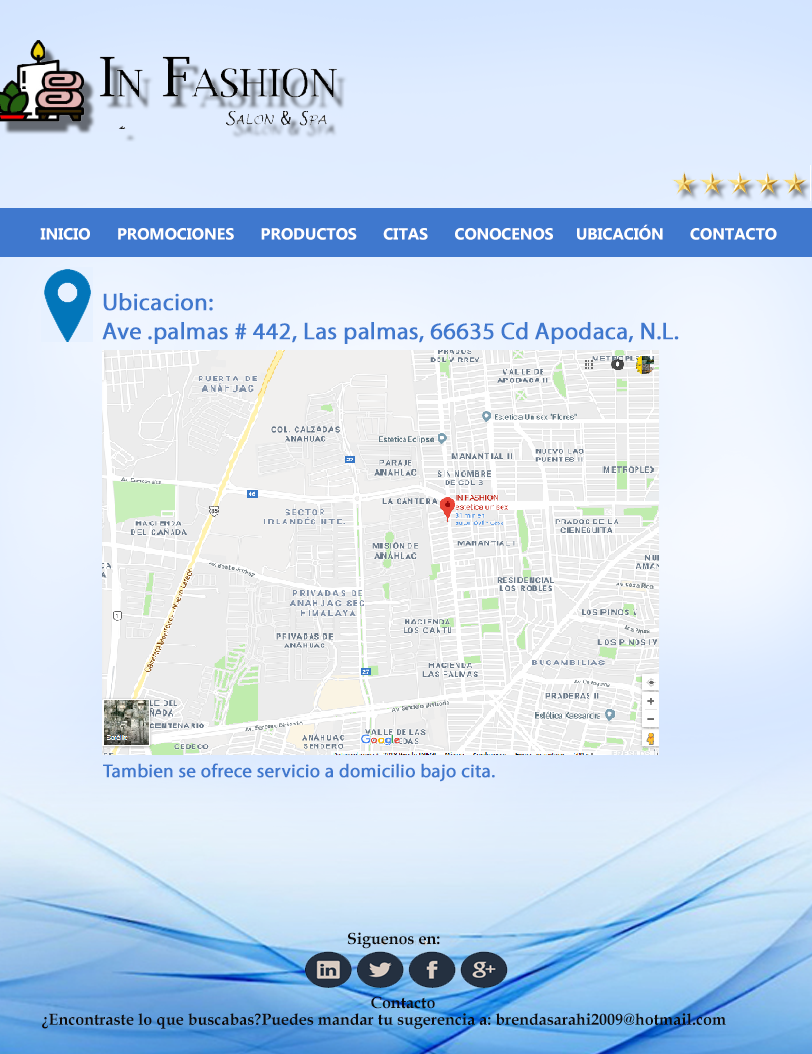
<style>
.page{position:relative;width:812px;height:1054px}
.page>*{position:absolute;margin:0}
.t1{font:16px "MicrosoftTaiLe-Bold";color:#ffffff}
.t2{font:12px "MicrosoftTaiLe-Bold";color:#ffffff}
.t3{font:24px "MyriadPro-Regular";color:#3f78ce;font-weight:bold}
.t4{font:18.7px "MyriadPro-Regular";color:#3f78ce;font-weight:bold}
.t5{font:12px "BookAntiqua-Bold";color:#0e0b0b}
</style>
<div class="page">
<p class="t1" style="left:40px;top:224px;width:737px;height:16px"><span class="t2">    I</span>NICIO      PROMOCIONES      PRODUCTOS      CITAS      CONOCENOS     UBICACIÓN      CONTACTO</p>
<p class="t3" style="left:102px;top:293px;width:577px;height:51px">Ubicacion:<br>Ave .palmas # 442, Las palmas, 66635 Cd Apodaca, N.L.</p>
<p class="t4" style="left:103px;top:763px;width:392px;height:19px">Tambien se ofrece servicio a domicilio bajo cita.</p>
<p class="t5" style="left:347px;top:932px;width:93px;height:17px">Siguenos en:</p>
<p class="t5" style="left:371px;top:996px;width:64px;height:13px">Contacto</p>
<p class="t5" style="left:42px;top:1013px;width:684px;height:16px">¿Encontraste lo que buscabas?Puedes mandar tu sugerencia a: brendasarahi2009@hotmail.com</p>
</div>
